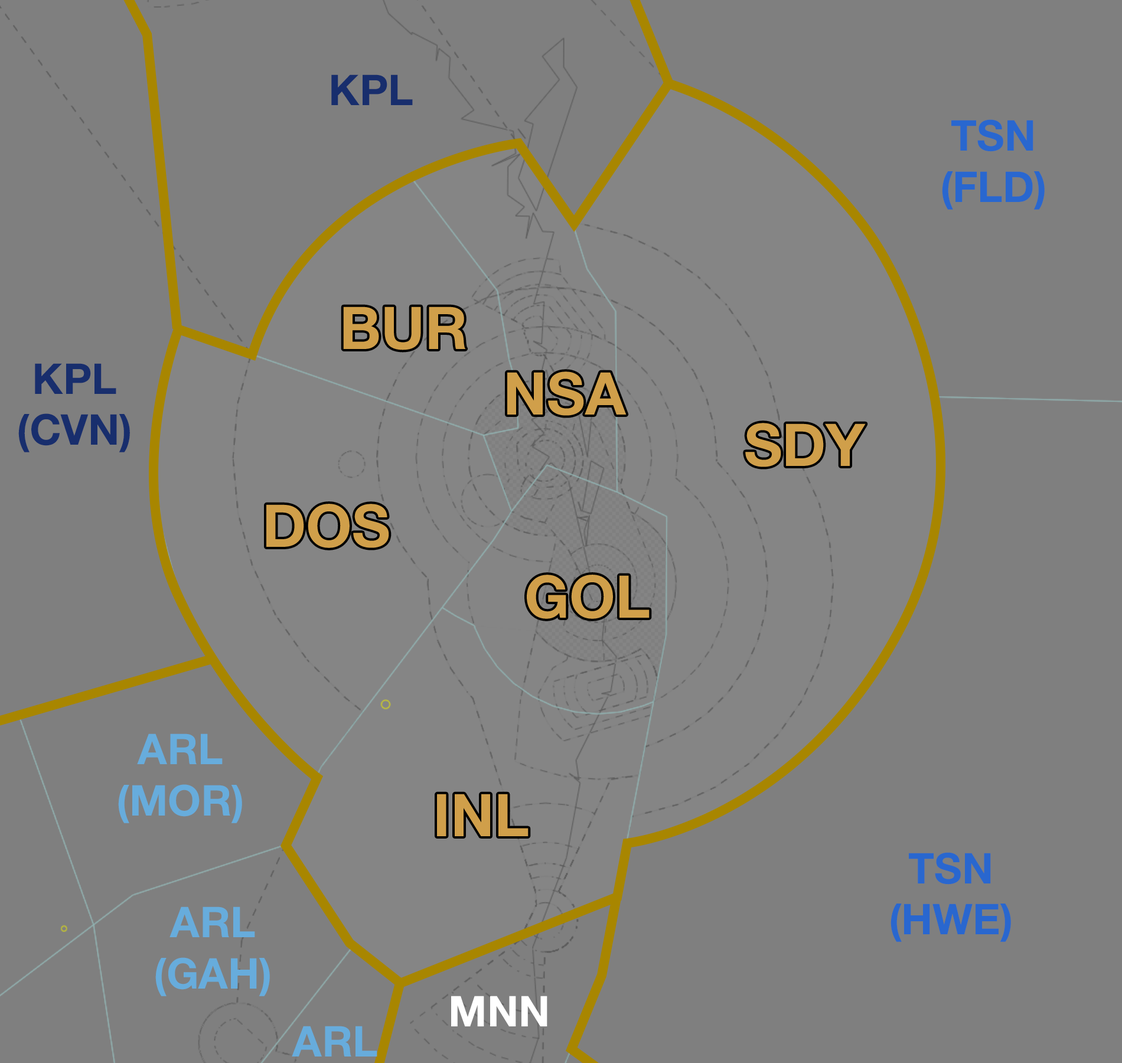
<style>
.page{position:relative;width:1122px;height:1063px;background:#7f7f7f}
.page>*{position:absolute;margin:0}
.t1{font:42.5px "HelveticaNeue-Bold";color:#182e6d}
.t2{font:42.5px "HelveticaNeue-Bold";color:#2967cf}
.t3{font:59px "HelveticaNeue-Bold";color:#d09f4a}
.t4{font:42.5px "HelveticaNeue-Bold";color:#67acdc}
.t5{font:42.5px "HelveticaNeue-Bold";color:#ffffff}
</style>
<div class="page">
<p class="t1" style="left:331px;top:74px;width:82px;height:31px">KPL</p>
<p class="t2" style="left:942px;top:119px;width:103px;height:91px;text-align:center">TSN<br>(FLD)</p>
<p class="t3" style="left:343px;top:306px;width:123px;height:44px">BUR</p>
<p class="t1" style="left:18px;top:363px;width:112px;height:89px;text-align:center">KPL<br>(CVN)</p>
<p class="t3" style="left:507px;top:371px;width:119px;height:45px">NSA</p>
<p class="t3" style="left:745px;top:423px;width:121px;height:44px">SDY</p>
<p class="t3" style="left:266px;top:504px;width:123px;height:44px">DOS</p>
<p class="t3" style="left:527px;top:575px;width:123px;height:44px">GOL</p>
<p class="t4" style="left:118px;top:733px;width:124px;height:90px;text-align:center">ARL<br>(MOR)</p>
<p class="t3" style="left:437px;top:794px;width:91px;height:42px">INL</p>
<p class="t2" style="left:890px;top:852px;width:121px;height:90px;text-align:center">TSN<br>(HWE)</p>
<p class="t4" style="left:155px;top:906px;width:115px;height:90px;text-align:center">ARL<br>(GAH)</p>
<p class="t5" style="left:451px;top:996px;width:96px;height:30px">MNN</p>
<p class="t4" style="left:292px;top:1026px;width:85px;height:30px">ARL</p>
</div>
